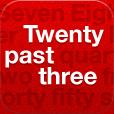
<style>
.page{position:relative;width:114px;height:114px}
.page>*{position:absolute;margin:0}
.t1{font:24px "HelveticaNeue-Bold";color:#ffffff}
</style>
<div class="page">
<p class="t1" style="left:23px;top:25px;width:81px;height:22px">Twenty</p>
<p class="t1" style="left:5px;top:47px;width:49px;height:21px">past</p>
<p class="t1" style="left:38px;top:67px;width:59px;height:18px">three</p>
</div>
